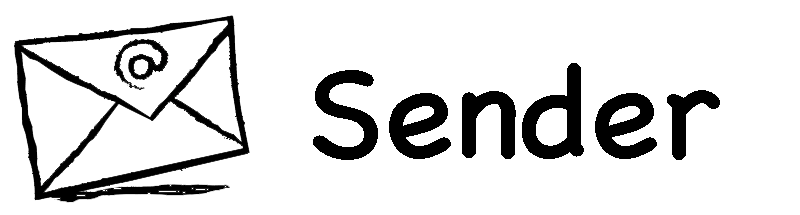
<style>
.page{position:relative;width:800px;height:215px;background:#ffffff}
.page>*{position:absolute;margin:0}
.t1{font:133.3px "ChalkboardSE-Regular";color:#000000}
</style>
<div class="page">
<p class="t1" style="left:313px;top:63px;width:407px;height:97px">Sender</p>
</div>
